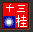
<style>
.page{position:relative;width:33px;height:32px;background:#f20000}
.page>*{position:absolute;margin:0}
.t1{font:10.4px "SimSun";color:#ffffff}
.t2{font:11.7px "SimSun";color:#ffffff}
</style>
<div class="page">
<p class="t1" style="left:6px;top:4px;width:19px;height:8px">十三</p>
<p class="t2" style="left:16px;top:15px;width:11px;height:12px">桂</p>
</div>
